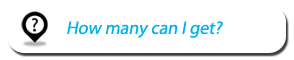
<style>
.page{position:relative;width:294px;height:60px;background:#ffffff}
.page>*{position:absolute;margin:0}
.t1{font:18px "MyriadPro-Regular";color:#00b0f0;font-style:italic}
</style>
<div class="page">
<p class="t1" style="left:67px;top:21px;width:156px;height:17px">How many can I get?</p>
</div>
